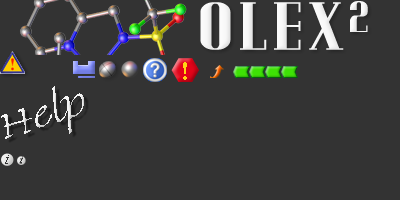
<style>
.page{position:relative;width:400px;height:200px;background:#333333}
.page>*{position:absolute;margin:0}
.t1{font:59px "PotteryBarn";letter-spacing:0.05em;color:#f8f8f8;scale:1.31 1}
.t2{font:59px "PotteryBarn";letter-spacing:0.04em;color:#f8f8f8;scale:1.31 1}
.t3{font:65.8px "PotteryBarn";letter-spacing:0.04em;color:#f8f8f8;scale:1.17 1}
.t4{font:23px "Asimov";letter-spacing:0.05em;color:#ffd614;scale:1.17 1}
.t5{font:36px "FineHand";letter-spacing:-0.01em;color:#f3f3f3}
</style>
<div class="page">
<p class="t1" style="left:200px;top:1px;width:168px;height:49px">OLE<span class="t2">X</span><span class="t3">2</span></p>
<p class="t4" style="left:183px;top:62px;width:4px;height:18px">!</p>
<p class="t5" style="left:1px;top:86px;width:83px;height:53px;rotate:-18deg">Help</p>
</div>
